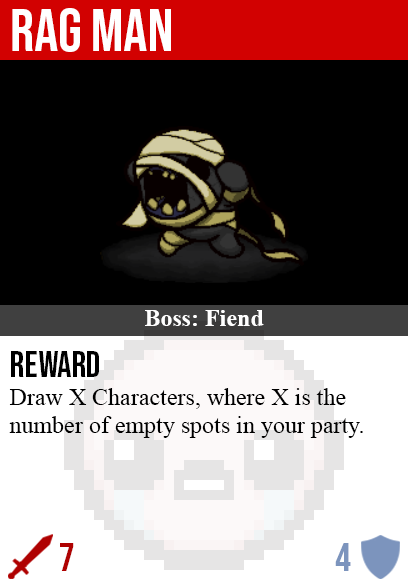
<style>
.page{position:relative;width:408px;height:585px;background:#000000}
.page>*{position:absolute;margin:0}
.t1{font:60px "BebasNeue-Regular";color:#ffffff}
.t2{font:24px "TimesNewRomanPS-BoldMT";color:#ffffff}
.t3{font:36px "BebasNeue-Regular";color:#000000}
.t4{font:24px "TimesNewRomanPSMT";color:#000000}
.t5{font:40px "BebasNeue-Regular";color:#af0202}
.t6{font:40px "BebasNeue-Regular";color:#7c94bd}
</style>
<div class="page">
<p class="t1" style="left:12px;top:8px;width:159px;height:44px">rag man</p>
<p class="t2" style="left:145px;top:310px;width:119px;height:16px">Boss: Fiend</p>
<p class="t3" style="left:11px;top:351px;width:88px;height:26px">reward</p>
<p class="t4" style="left:9px;top:388px;width:354px;height:50px">Draw X Characters, where X is the<br>number of empty spots in your party.</p>
<p class="t5" style="left:60px;top:543px;width:14px;height:28px">7</p>
<p class="t6" style="left:335px;top:543px;width:16px;height:28px">4</p>
</div>
